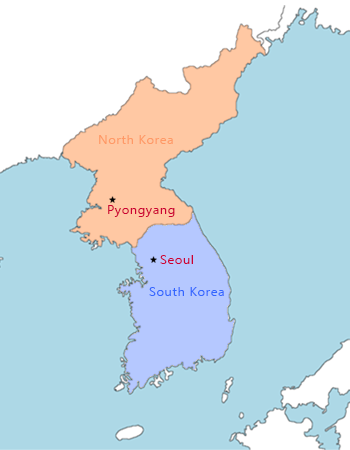
<style>
.page{position:relative;width:350px;height:450px;background:#add8e6}
.page>*{position:absolute;margin:0}
.t1{font:11.6px "MicrosoftNewTaiLue";letter-spacing:0.045em;color:#ff9966;scale:1.11 1}
.t2{font:11.6px "MicrosoftNewTaiLue";letter-spacing:0.045em;color:#cc0033;scale:1.11 1}
.t3{font:11.6px "MicrosoftNewTaiLue";letter-spacing:0.045em;color:#3366ff;scale:1.11 1}
</style>
<div class="page">
<p class="t1" style="left:99px;top:135px;width:74px;height:9px">North Korea</p>
<p class="t2" style="left:108px;top:205px;width:67px;height:12px">Pyongyang</p>
<p class="t2" style="left:160px;top:255px;width:33px;height:9px">Seoul</p>
<p class="t3" style="left:149px;top:287px;width:75px;height:9px">South Korea</p>
</div>
